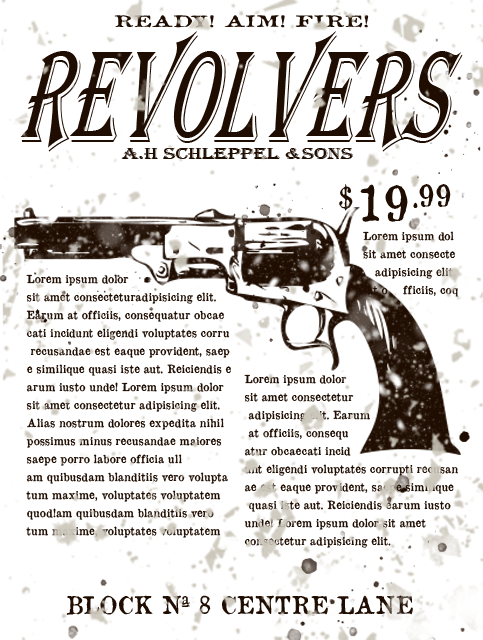
<style>
.page{position:relative;width:483px;height:640px;background:#ffffff}
.page>*{position:absolute;margin:0}
.t1{font:15.4px "OldNewspaperTypes";color:#1f0d01;scale:1.59 1}
.t2{font:139.5px "Algerian";color:#1f0d01;scale:0.56 1}
.t3{font:16.6px "Algerian";color:#1f0d01;scale:1.32 1}
.t4{font:30px "OldNewspaperTypes";color:#1f0d01}
.t5{font:48px "OldNewspaperTypes";color:#1f0d01}
.t6{font:11px/18px "OldNewspaperTypes";color:#1f0d01}
.t7{font:24px "OldNewspaperTypes";color:#1f0d01}
</style>
<div class="page">
<p class="t1" style="left:114px;top:15px;width:255px;height:13px">READY! AIM! FIRE!</p>
<p class="t2" style="left:20px;top:31px;width:443px;height:121px">REVOLVERS</p>
<p class="t3" style="left:121px;top:148px;width:232px;height:11px">A.H SCHLEPPEL &amp;SONS</p>
<p class="t4" style="left:339px;top:184px;width:14px;height:27px">$</p>
<p class="t5" style="left:360px;top:184px;width:48px;height:38px">19</p>
<p class="t4" style="left:413px;top:184px;width:38px;height:24px">.99</p>
<p class="t6" style="left:363px;top:231px;width:96px;height:66px">Lorem ipsum dol <br>sit amet consecte<br>   adipisicing elit. <br> at o    fficiis, coq</p>
<p class="t6" style="left:26px;top:274px;width:205px;height:264px">Lorem ipsum dolor <br>sit amet consecteturadipisicing elit. <br>Earum at officiis, consequatur obcae<br>cati incidunt eligendi voluptates corru<br> recusandae est eaque provident, saep<br>e similique quasi iste aut. Reiciendis e<br>arum iusto unde! Lorem ipsum dolor <br>sit amet consectetur adipisicing elit. <br>Alias nostrum dolores expedita nihil <br>possimus minus recusandae maiores <br>saepe porro labore officia ull<br>am quibusdam blanditiis vero volupta<br>tum maxime, voluptates voluptatem <br>quod!am quibusdam blanditiis vero<br>tum maxime, voluptates voluptatem</p>
<p class="t6" style="left:244px;top:374px;width:214px;height:174px">Lorem ipsum dolor <br>sit amet consectetur<br> adipisicing elit. Earum<br> at officiis, consequ<br>atur obcaecati incid<br>unt eligendi voluptates corrupti recusan<br>ae est eaque provident, saepe similique<br> quasi iste aut. Reiciendis earum iusto <br>unde! Lorem ipsum dolor sit amet <br>consectetur adipisicing elit.</p>
<p class="t7" style="left:66px;top:595px;width:347px;height:20px">BLOCK Nª 8 CENTRE LANE</p>
</div>
